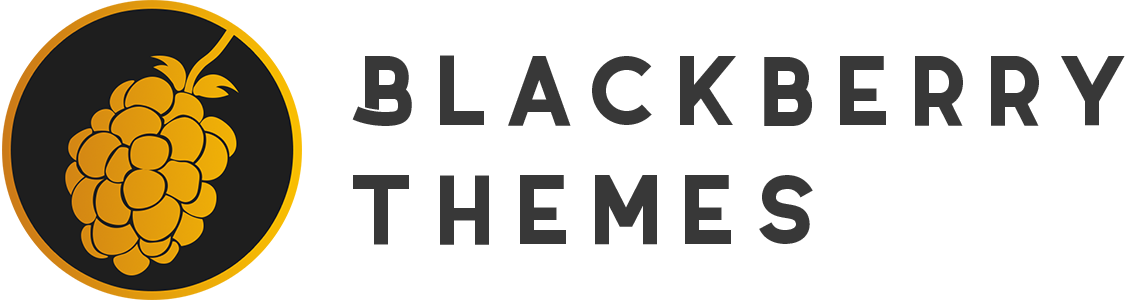
<style>
.page{position:relative;width:1127px;height:300px;background:#ffffff}
.page>*{position:absolute;margin:0}
.t1{font:99px "Coyote-SemiBoldDEMO";letter-spacing:0.02em;color:#383838}
</style>
<div class="page">
<p class="t1" style="left:352px;top:55px;width:773px;height:190px">Blackberry<br>Themes</p>
</div>
